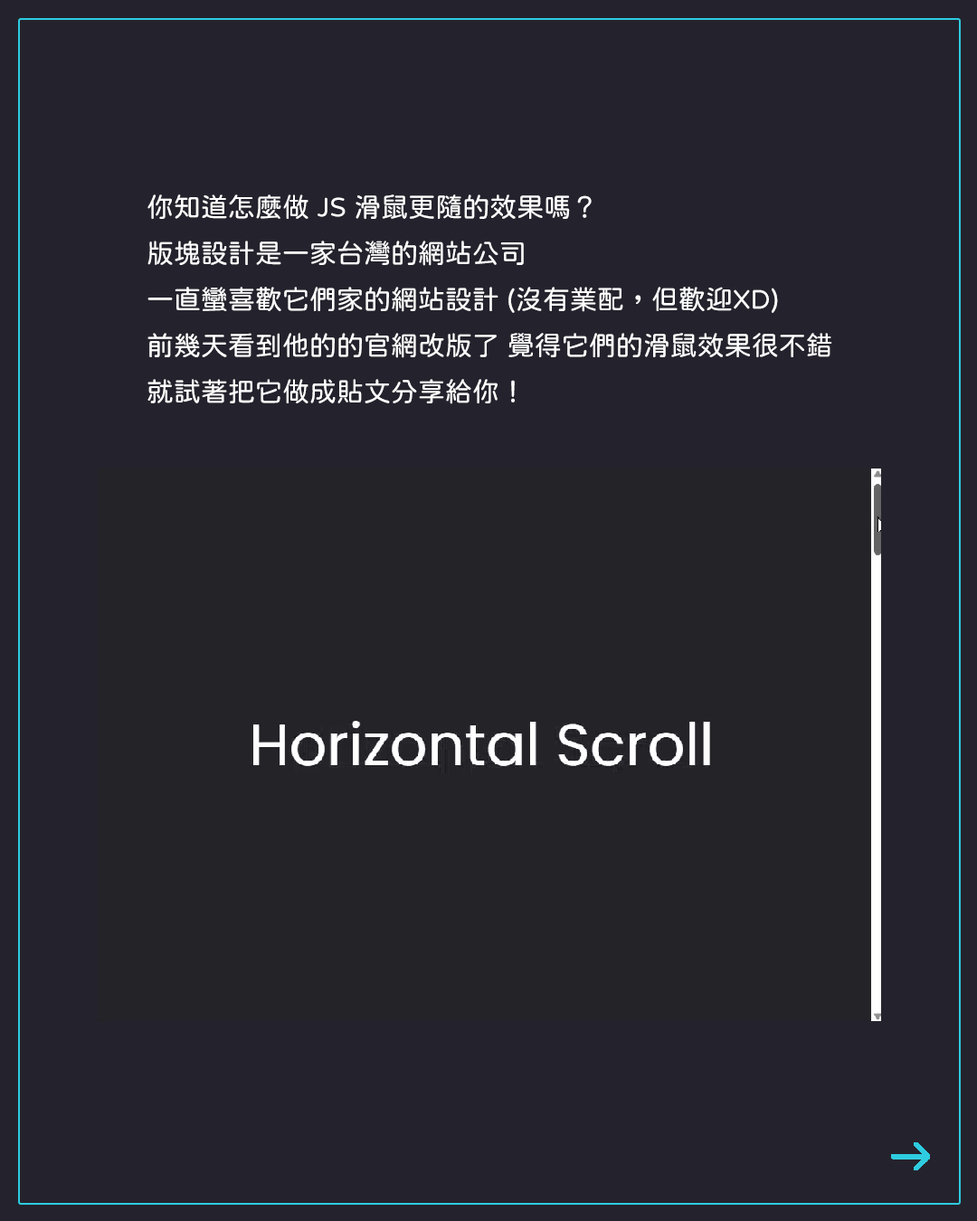
<style>
.page{position:relative;width:977px;height:1221px;background:#24232d}
.page>*{position:absolute;margin:0}
.t1{font:27.1px/46.1px "jf-openhuninn-1.1";color:#ffffff}
</style>
<div class="page">
<p class="t1" style="left:147px;top:194px;width:685px;height:210px">你知道怎麼做 JS 滑鼠更隨的效果嗎？<br>版塊設計是一家台灣的網站公司<br>一直蠻喜歡它們家的網站設計 (沒有業配，但歡迎XD)<br>前幾天看到他的的官網改版了 覺得它們的滑鼠效果很不錯<br>就試著把它做成貼文分享給你！</p>
</div>
